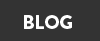
<style>
.page{position:relative;width:100px;height:41px;background:#333333}
.page>*{position:absolute;margin:0}
.t1{font:19.3px "BrandonGrotesque-Black";color:#ffffff}
</style>
<div class="page">
<p class="t1" style="left:24px;top:15px;width:48px;height:14px">BLOG</p>
</div>
